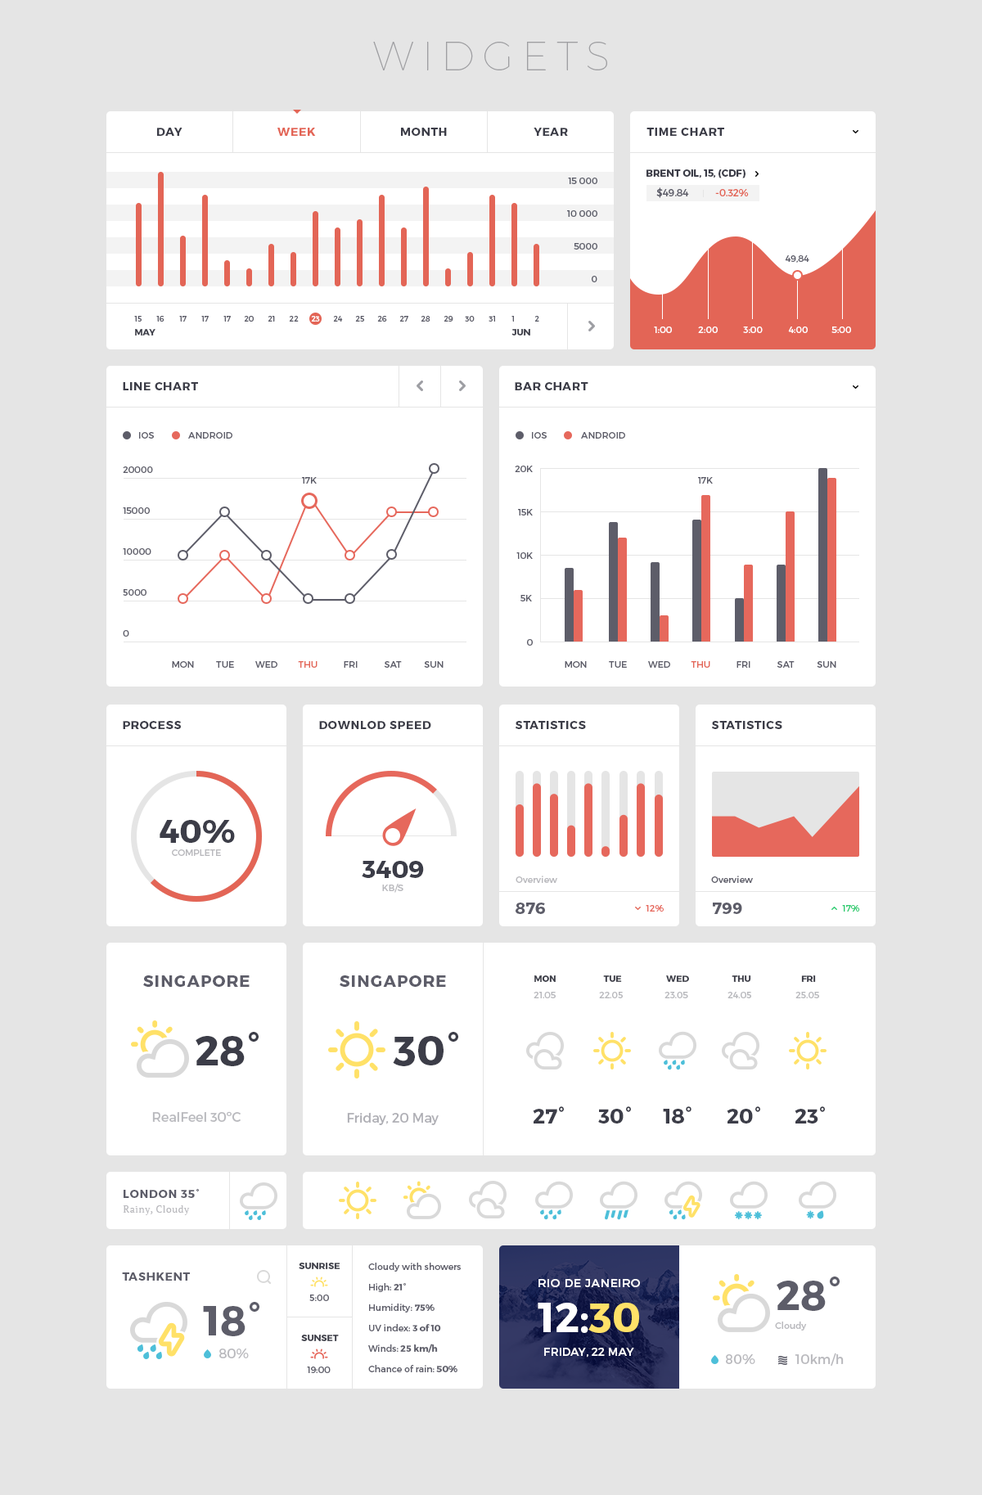
<style>
.page{position:relative;width:982px;height:1495px;background:#ffffff}
.page>*{position:absolute;margin:0}
.t1{font:40.9px "Montserrat-Hairline";letter-spacing:0.2em;color:#9f9fa2;text-transform:uppercase}
.t2{font:11.5px "Montserrat-Bold";letter-spacing:0.05em;color:#3c3d48}
.t3{font:11.5px "Montserrat-Bold";letter-spacing:0.05em;color:#e36556}
.t4{font:9.8px "Montserrat-Bold";color:#3c3d48;text-transform:uppercase}
.t5{font:9px "Montserrat-Regular";color:#5b5d69}
.t6{font:9.8px "Montserrat-Regular";color:#5d5d69;text-transform:uppercase}
.t7{font:9.8px "Montserrat-Regular";color:#e36556;text-transform:uppercase}
.t8{font:9px "Montserrat-Regular";color:#5d5d69}
.t9{font:7.4px "Montserrat-Regular";color:#5d5d69}
.t10{font:7.4px "Montserrat-Regular";color:#ffffff}
.t11{font:7.4px "Montserrat-Regular";color:#5b5d69}
.t12{font:9px "Montserrat-Bold";color:#3c3d48}
.t13{font:9px "Montserrat-Regular";color:#ffffff}
.t14{font:9px "Montserrat-Regular";color:#5d5d69;text-transform:uppercase}
.t15{font:9px "Montserrat-Regular";color:#e36556;text-transform:uppercase}
.t16{font:11.5px "Montserrat-Bold";letter-spacing:0.05em;color:#3c3d48;text-transform:uppercase}
.t17{font:32.7px "Montserrat-Bold";color:#3c3d48;text-transform:uppercase}
.t18{font:9px "Montserrat-Regular";color:#b9b9bd;text-transform:uppercase}
.t19{font:24.5px "Montserrat-Bold";color:#3c3d48;text-transform:uppercase}
.t20{font:9px "Montserrat-Regular";color:#b9b9bd}
.t21{font:16.4px "Montserrat-Bold";color:#5d5d69;text-transform:uppercase}
.t22{font:9px "Montserrat-Regular";color:#e6685c;text-transform:uppercase}
.t23{font:9px "Montserrat-Regular";color:#2ecc71;text-transform:uppercase}
.t24{font:16.4px "Montserrat-Bold";letter-spacing:0.05em;color:#5d5d69;text-transform:uppercase}
.t25{font:9px "Montserrat-Bold";color:#3c3d48;text-transform:uppercase}
.t26{font:9px "Montserrat-Regular";color:#b8b9bd;text-transform:uppercase}
.t27{font:40.9px "Montserrat-Bold";color:#3c3d48;text-transform:uppercase}
.t28{font:20.5px "Montserrat-Bold";color:#3c3d48;text-transform:uppercase}
.t29{font:13.1px "Montserrat-Regular";color:#b8b9bd}
.t30{font:13.1px "Montserrat-Regular";color:#b8b9bd;text-transform:uppercase}
.t31{font:13.1px "Montserrat-Regular";color:#aeaeb4}
.t32{font:11.5px "Montserrat-Bold";letter-spacing:0.05em;color:#5d5d69;text-transform:uppercase}
.t33{font:9.8px "PTSerif-Regular";letter-spacing:0.05em;color:#b9b9bd}
.t34{font:9px/20.5px "Montserrat-Regular";color:#5d5d69}
.t35{font:9px/20.5px "Montserrat-Bold";color:#5d5d69}
.t36{font:40.9px "Montserrat-Bold";color:#5d5d69;text-transform:uppercase}
.t37{font:11.5px "Montserrat-Regular";letter-spacing:0.05em;color:#ffffff;text-transform:uppercase}
.t38{font:40.9px "Montserrat-Bold";color:#ffffff;text-transform:uppercase}
.t39{font:40.9px "Montserrat-Bold";color:#ffe168;text-transform:uppercase}
.t40{font:13.1px "Montserrat-Regular";color:#b9b9bd;text-transform:uppercase}
.t41{font:11.5px "Montserrat-Regular";color:#ffffff;text-transform:uppercase}
.t42{font:13.1px "Montserrat-Regular";color:#b9b9bd}
</style>
<div class="page">
<p class="t1" style="left:373px;top:42px;width:234px;height:28px">Widgets</p>
<p class="t2" style="left:157px;top:128px;width:25px;height:8px">DAY</p>
<p class="t3" style="left:277px;top:128px;width:39px;height:8px">WEEK</p>
<p class="t2" style="left:401px;top:128px;width:46px;height:8px">MONTH</p>
<p class="t2" style="left:533px;top:128px;width:35px;height:8px">YEAR</p>
<p class="t2" style="left:646px;top:128px;width:78px;height:8px">TIME CHART</p>
<p class="t4" style="left:646px;top:169px;width:99px;height:9px">Brent Oil, 15, (CDF)</p>
<p class="t5" style="left:568px;top:178px;width:29px;height:6px">15 000</p>
<p class="t6" style="left:656px;top:187px;width:33px;height:11px">$49.84</p>
<p class="t7" style="left:715px;top:189px;width:34px;height:7px">-0.32%</p>
<p class="t5" style="left:567px;top:210px;width:30px;height:7px">10 000</p>
<p class="t5" style="left:574px;top:243px;width:23px;height:7px">5000</p>
<p class="t8" style="left:785px;top:255px;width:24px;height:8px">49,84</p>
<p class="t5" style="left:592px;top:276px;width:5px;height:6px">0</p>
<p class="t9" style="left:134px;top:316px;width:8px;height:6px">15</p>
<p class="t9" style="left:156px;top:316px;width:8px;height:6px">16</p>
<p class="t9" style="left:179px;top:316px;width:8px;height:6px">17</p>
<p class="t9" style="left:201px;top:316px;width:8px;height:6px">17</p>
<p class="t9" style="left:223px;top:316px;width:8px;height:6px">17</p>
<p class="t9" style="left:244px;top:316px;width:10px;height:6px">20</p>
<p class="t9" style="left:268px;top:316px;width:7px;height:6px">21</p>
<p class="t9" style="left:289px;top:316px;width:10px;height:6px">22</p>
<p class="t10" style="left:311px;top:316px;width:9px;height:6px">23</p>
<p class="t9" style="left:333px;top:316px;width:10px;height:6px">24</p>
<p class="t9" style="left:355px;top:316px;width:9px;height:6px">25</p>
<p class="t9" style="left:377px;top:316px;width:10px;height:6px">26</p>
<p class="t9" style="left:399px;top:316px;width:9px;height:6px">27</p>
<p class="t9" style="left:421px;top:316px;width:9px;height:6px">28</p>
<p class="t9" style="left:443px;top:316px;width:10px;height:6px">29</p>
<p class="t9" style="left:465px;top:316px;width:10px;height:6px">30</p>
<p class="t9" style="left:488px;top:316px;width:7px;height:6px">31</p>
<p class="t9" style="left:511px;top:316px;width:3px;height:6px">1</p>
<p class="t11" style="left:534px;top:316px;width:5px;height:6px">2</p>
<p class="t12" style="left:135px;top:329px;width:20px;height:6px">MAY</p>
<p class="t12" style="left:511px;top:329px;width:19px;height:6px">JUN</p>
<p class="t13" style="left:654px;top:326px;width:18px;height:7px">1:00</p>
<p class="t13" style="left:698px;top:326px;width:20px;height:7px">2:00</p>
<p class="t13" style="left:743px;top:326px;width:20px;height:7px">3:00</p>
<p class="t13" style="left:788px;top:326px;width:20px;height:7px">4:00</p>
<p class="t13" style="left:831px;top:326px;width:20px;height:7px">5:00</p>
<p class="t2" style="left:123px;top:382px;width:75px;height:8px">LINE CHART</p>
<p class="t2" style="left:515px;top:382px;width:73px;height:8px">BAR CHART</p>
<p class="t14" style="left:139px;top:432px;width:15px;height:7px">IOS</p>
<p class="t14" style="left:188px;top:432px;width:44px;height:7px">Android</p>
<p class="t14" style="left:532px;top:432px;width:15px;height:7px">IOS</p>
<p class="t14" style="left:581px;top:432px;width:44px;height:7px">Android</p>
<p class="t14" style="left:123px;top:466px;width:30px;height:7px">20000</p>
<p class="t14" style="left:515px;top:466px;width:18px;height:6px">20K</p>
<p class="t14" style="left:302px;top:477px;width:15px;height:7px">17k</p>
<p class="t14" style="left:698px;top:477px;width:15px;height:7px">17k</p>
<p class="t14" style="left:123px;top:507px;width:27px;height:7px">15000</p>
<p class="t14" style="left:518px;top:509px;width:15px;height:6px">15K</p>
<p class="t14" style="left:123px;top:548px;width:28px;height:7px">10000</p>
<p class="t14" style="left:516px;top:552px;width:17px;height:7px">10K</p>
<p class="t14" style="left:123px;top:589px;width:23px;height:7px">5000</p>
<p class="t14" style="left:520px;top:595px;width:12px;height:6px">5K</p>
<p class="t14" style="left:123px;top:630px;width:6px;height:7px">0</p>
<p class="t14" style="left:527px;top:639px;width:6px;height:7px">0</p>
<p class="t14" style="left:172px;top:661px;width:22px;height:7px">mon</p>
<p class="t14" style="left:216px;top:661px;width:18px;height:7px">tue</p>
<p class="t14" style="left:255px;top:661px;width:22px;height:7px">wed</p>
<p class="t15" style="left:298px;top:661px;width:19px;height:7px">thu</p>
<p class="t14" style="left:344px;top:661px;width:14px;height:7px">fri</p>
<p class="t14" style="left:384px;top:661px;width:18px;height:7px">sat</p>
<p class="t14" style="left:424px;top:661px;width:19px;height:7px">sun</p>
<p class="t14" style="left:565px;top:661px;width:22px;height:7px">mon</p>
<p class="t14" style="left:609px;top:661px;width:18px;height:7px">tue</p>
<p class="t14" style="left:648px;top:661px;width:22px;height:7px">wed</p>
<p class="t15" style="left:691px;top:661px;width:19px;height:7px">thu</p>
<p class="t14" style="left:736px;top:661px;width:14px;height:7px">fri</p>
<p class="t14" style="left:776px;top:661px;width:18px;height:7px">sat</p>
<p class="t14" style="left:817px;top:661px;width:19px;height:7px">sun</p>
<p class="t16" style="left:123px;top:721px;width:58px;height:8px">Process</p>
<p class="t16" style="left:319px;top:721px;width:112px;height:8px">Downlod speed</p>
<p class="t16" style="left:515px;top:721px;width:71px;height:8px">Statistics</p>
<p class="t16" style="left:712px;top:721px;width:70px;height:8px">Statistics</p>
<p class="t17" style="left:160px;top:820px;width:75px;height:23px">40%</p>
<p class="t18" style="left:172px;top:849px;width:49px;height:7px">COMPLETE</p>
<p class="t19" style="left:362px;top:861px;width:62px;height:17px">3409</p>
<p class="t20" style="left:515px;top:875px;width:42px;height:8px">Overview</p>
<p class="t8" style="left:711px;top:875px;width:42px;height:8px">Overview</p>
<p class="t18" style="left:382px;top:884px;width:21px;height:9px">kb/s</p>
<p class="t21" style="left:515px;top:902px;width:30px;height:12px">876</p>
<p class="t22" style="left:646px;top:905px;width:18px;height:6px">12%</p>
<p class="t21" style="left:713px;top:902px;width:29px;height:12px">799</p>
<p class="t23" style="left:842px;top:905px;width:18px;height:6px">17%</p>
<p class="t24" style="left:143px;top:975px;width:107px;height:12px">SINGAPORE</p>
<p class="t24" style="left:340px;top:975px;width:106px;height:12px">SINGAPORE</p>
<p class="t25" style="left:534px;top:975px;width:22px;height:7px">MON</p>
<p class="t25" style="left:603px;top:975px;width:19px;height:7px">TUE</p>
<p class="t25" style="left:666px;top:975px;width:23px;height:7px">WED</p>
<p class="t25" style="left:731px;top:975px;width:20px;height:7px">THU</p>
<p class="t25" style="left:801px;top:975px;width:15px;height:7px">Fri</p>
<p class="t26" style="left:533px;top:992px;width:23px;height:6px">21.05</p>
<p class="t26" style="left:599px;top:992px;width:24px;height:6px">22.05</p>
<p class="t26" style="left:664px;top:992px;width:24px;height:6px">23.05</p>
<p class="t26" style="left:727px;top:992px;width:24px;height:6px">24.05</p>
<p class="t26" style="left:795px;top:992px;width:24px;height:6px">25.05</p>
<p class="t27" style="left:196px;top:1032px;width:63px;height:34px">28°</p>
<p class="t27" style="left:393px;top:1032px;width:65px;height:34px">30°</p>
<p class="t28" style="left:533px;top:1106px;width:31px;height:17px">27°</p>
<p class="t28" style="left:598px;top:1106px;width:33px;height:17px">30°</p>
<p class="t28" style="left:663px;top:1106px;width:28px;height:17px">18°</p>
<p class="t28" style="left:727px;top:1106px;width:33px;height:17px">20°</p>
<p class="t28" style="left:794px;top:1106px;width:31px;height:17px">23°</p>
<p class="t29" style="left:152px;top:1111px;width:89px;height:11px"><span class="t30">R</span>ealFeel 30ºC</p>
<p class="t31" style="left:347px;top:1113px;width:92px;height:12px">Friday, 20 May</p>
<p class="t32" style="left:124px;top:1189px;width:75px;height:9px">LONDON 35°</p>
<p class="t33" style="left:123px;top:1205px;width:67px;height:10px">Rainy, Cloudy</p>
<p class="t25" style="left:299px;top:1262px;width:41px;height:7px">Sunrise</p>
<p class="t34" style="left:368px;top:1262px;width:93px;height:110px">Cloudy with showers<br>High: <span class="t35">21°<br></span>Humidity: <span class="t35">75%<br></span>UV index: <span class="t35">3 of 10<br></span>Winds: <span class="t35">25 km/h <br></span>Chance of rain: <span class="t35">50%</span></p>
<p class="t32" style="left:122px;top:1272px;width:68px;height:8px">TASHKENT</p>
<p class="t36" style="left:776px;top:1276px;width:63px;height:35px">28°</p>
<p class="t37" style="left:538px;top:1279px;width:102px;height:8px">Rio de Janeiro</p>
<p class="t36" style="left:203px;top:1302px;width:56px;height:34px">18°</p>
<p class="t8" style="left:309px;top:1294px;width:20px;height:7px">5:00</p>
<p class="t38" style="left:538px;top:1303px;width:101px;height:30px">12:<span class="t39">30</span></p>
<p class="t20" style="left:775px;top:1321px;width:32px;height:9px">Cloudy</p>
<p class="t25" style="left:301px;top:1334px;width:38px;height:7px">Sunset</p>
<p class="t40" style="left:219px;top:1348px;width:30px;height:10px">80%</p>
<p class="t41" style="left:544px;top:1348px;width:90px;height:9px">FRIDAY, 22 MAY</p>
<p class="t40" style="left:726px;top:1354px;width:29px;height:10px">80%</p>
<p class="t42" style="left:794px;top:1352px;width:50px;height:14px"><span class="t40">10</span>km/h</p>
<p class="t8" style="left:307px;top:1366px;width:24px;height:7px">19:00</p>
</div>
